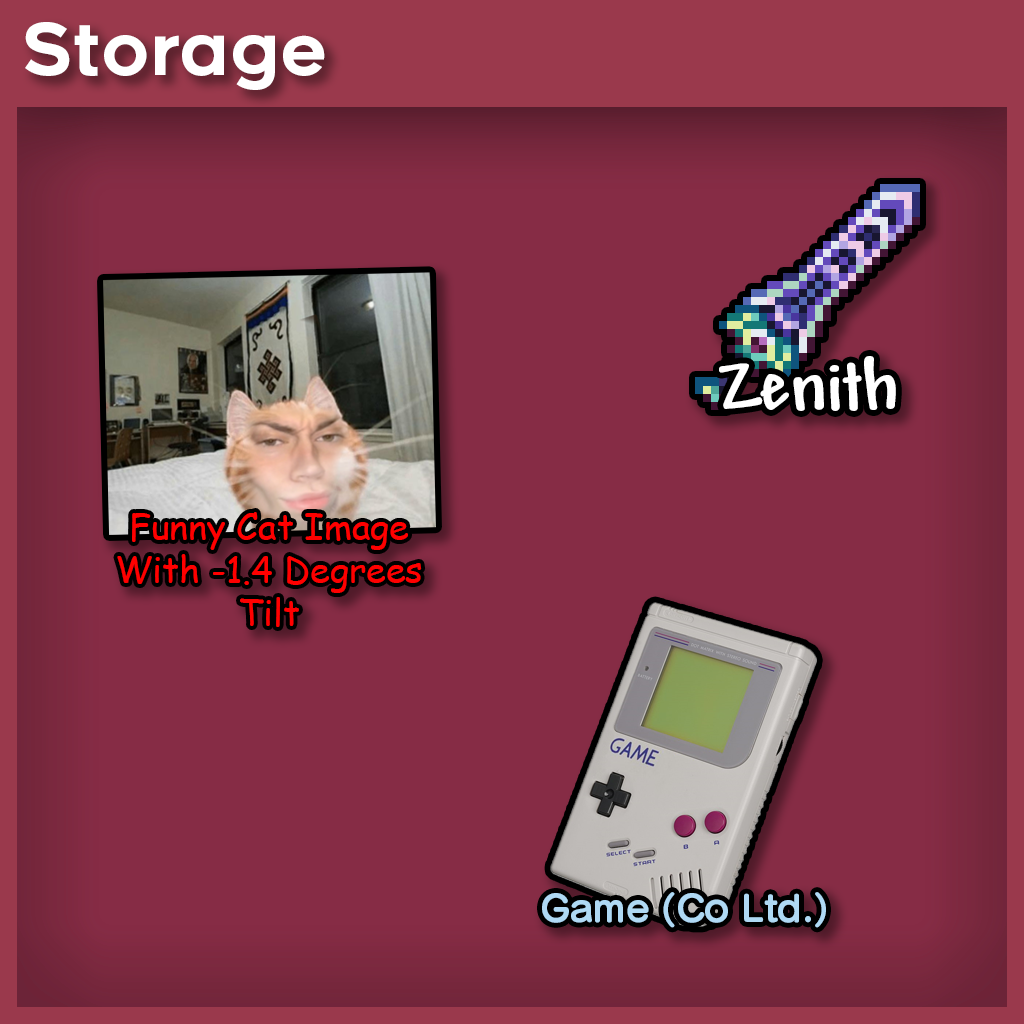
<style>
.page{position:relative;width:1024px;height:1024px;background:#862c45}
.page>*{position:absolute;margin:0}
.t1{font:70.8px "Renogare-Regular";color:#ffffff}
.t2{font:78px "AndyStd-Bold";color:#ffffff}
.t3{font:36px "ComicSansMS";color:#ff0000}
.t4{font:36px "SeuratPro-B";color:#afd9f4}
</style>
<div class="page">
<p class="t1" style="left:25px;top:22px;width:300px;height:68px">Storage</p>
<p class="t2" style="left:719px;top:356px;width:177px;height:55px">Zenith</p>
<p class="t3" style="left:117px;top:512px;width:305px;height:115px;text-align:center">Funny Cat Image<br>With -1.4 Degrees<br>Tilt</p>
<p class="t4" style="left:542px;top:892px;width:284px;height:36px">Game (Co Ltd.)</p>
</div>
